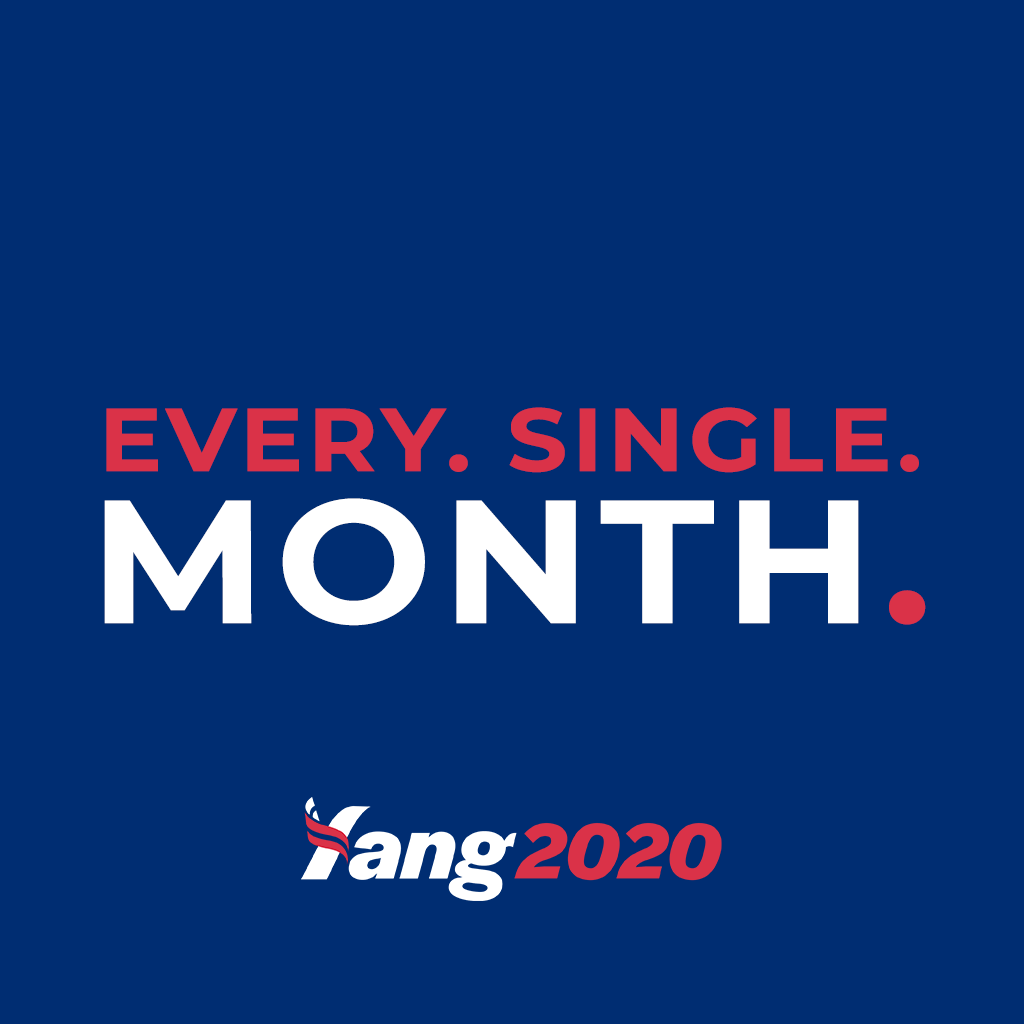
<style>
.page{position:relative;width:1024px;height:1024px;background:#002d72}
.page>*{position:absolute;margin:0}
.t1{font:89.1px/151.9px "Montserrat-Bold";letter-spacing:0.05em;color:#da3248;text-transform:uppercase;scale:1.06 1}
.t2{font:174.8px/151.9px "Montserrat-Bold";letter-spacing:0.05em;color:#ffffff;text-transform:uppercase;scale:1.06 1}
.t3{font:174.8px/151.9px "Montserrat-Bold";letter-spacing:0.05em;color:#da3248;text-transform:uppercase;scale:1.06 1}
</style>
<div class="page">
<p class="t1" style="left:104px;top:407px;width:822px;height:219px;text-align:center">Every. Single.<br><span class="t2">Month</span><span class="t3">.</span></p>
</div>
